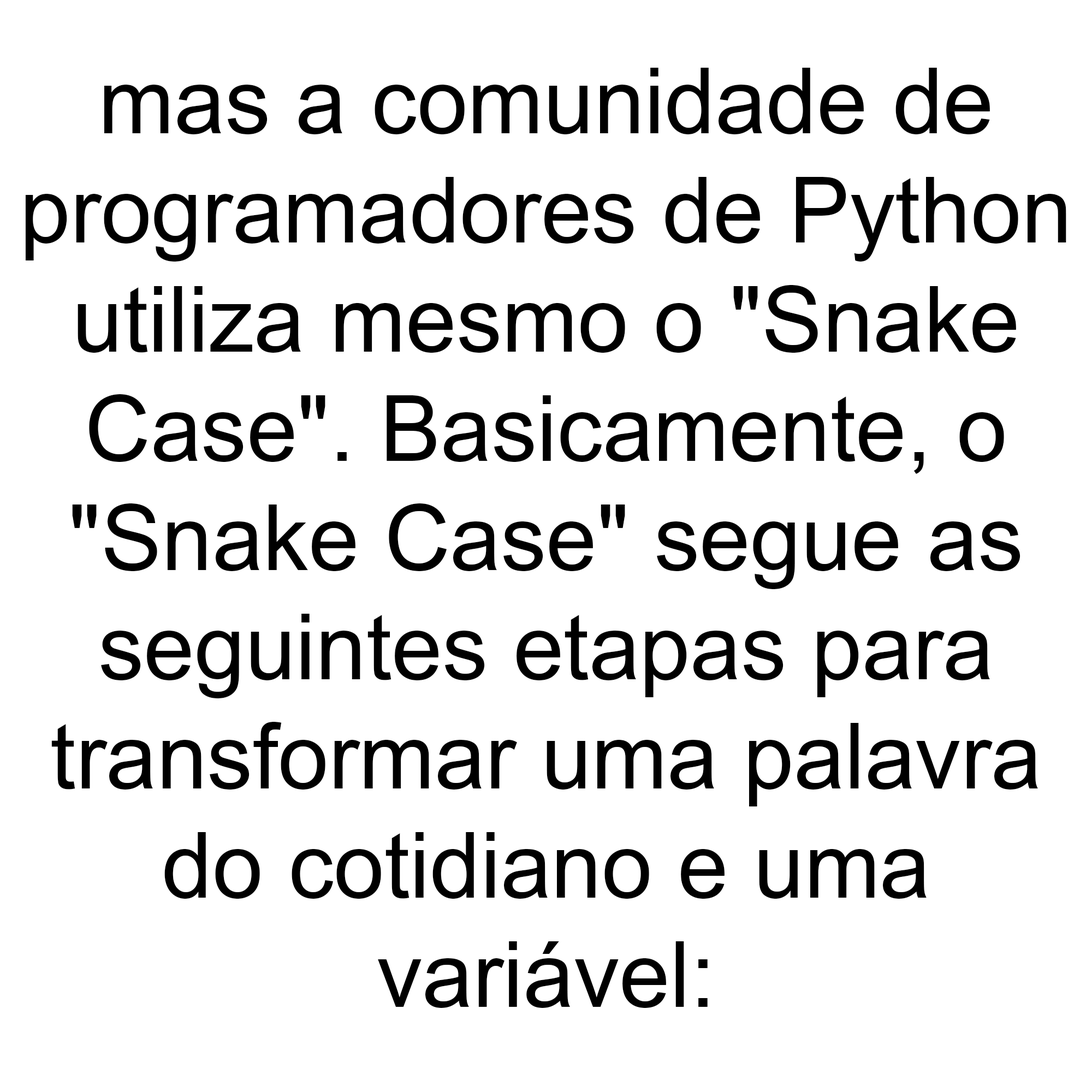
<style>
.page{position:relative;width:1092px;height:1092px;background:#ffffff}
.page>*{position:absolute;margin:0}
.t1{font:91px "ArialMT";color:#000000}
</style>
<div class="page">
<p class="t1" style="left:25px;top:68px;width:1041px;height:940px;text-align:center">mas a comunidade de<br>programadores de Python<br>utiliza mesmo o "Snake<br>Case". Basicamente, o<br>"Snake Case" segue as<br>seguintes etapas para<br>transformar uma palavra<br>do cotidiano e uma<br>variável:</p>
</div>
